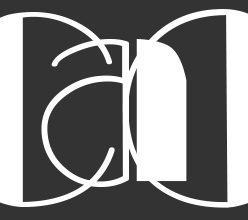
<style>
.page{position:relative;width:248px;height:220px;background:#333333}
.page>*{position:absolute;margin:0}
.t1{font:252.7px "SFUBalletEngraved";color:#ffffff}
</style>
<div class="page">
<p class="t1" style="left:41px;top:39px;width:146px;height:148px">a</p>
</div>
